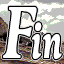
<style>
.page{position:relative;width:64px;height:64px;background:#ffffff}
.page>*{position:absolute;margin:0}
.t1{font:77.6px "Monarcha-BoldItalic";letter-spacing:-0.03em;color:#ffffff;scale:0.67 1}
.t2{font:48.5px "Monarcha-BoldItalic";letter-spacing:0.015em;color:#ffffff;scale:0.67 1}
.t3{font:48.5px "Monarcha-BoldItalic";letter-spacing:-0.025em;color:#ffffff;scale:0.67 1}
</style>
<div class="page">
<p class="t1" style="left:3px;top:7px;width:59px;height:52px">F<span class="t2">i</span><span class="t3">n</span></p>
</div>
